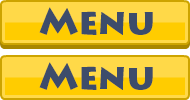
<style>
.page{position:relative;width:190px;height:100px;background:#ffd948}
.page>*{position:absolute;margin:0}
.t1{font:36px "LithosPro-Black";color:#3d4c6b}
</style>
<div class="page">
<p class="t1" style="left:39px;top:7px;width:114px;height:28px">Menu</p>
<p class="t1" style="left:39px;top:62px;width:114px;height:28px">Menu</p>
</div>
